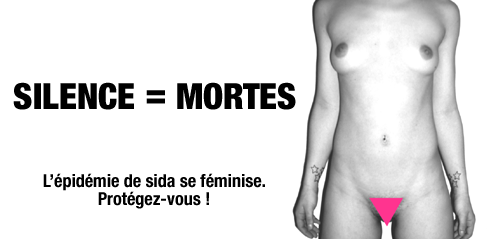
<style>
.page{position:relative;width:490px;height:239px;background:#ffffff}
.page>*{position:absolute;margin:0}
.t1{font:36px "HelveticaNeue-BlackCond";color:#000000}
.t2{font:18px/18px "HelveticaNeue-BoldCond";color:#000000}
</style>
<div class="page">
<p class="t1" style="left:13px;top:82px;width:283px;height:28px">SILENCE = MORTES</p>
<p class="t2" style="left:43px;top:173px;width:222px;height:36px;text-align:center">L’épidémie de sida se féminise.<br>Protégez-vous !</p>
</div>
